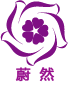
<style>
.page{position:relative;width:68px;height:86px;background:#ffffff}
.page>*{position:absolute;margin:0}
.t1{font:14px "MicrosoftYaHei";color:#99118e;font-weight:bold}
</style>
<div class="page">
<p class="t1" style="left:15px;top:67px;width:40px;height:15px">蔚  然</p>
</div>
